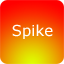
<style>
.page{position:relative;width:64px;height:64px}
.page>*{position:absolute;margin:0}
.t1{font:14.9px "Verdana";color:#ffffff}
</style>
<div class="page">
<p class="t1" style="left:12px;top:24px;width:41px;height:15px">Spike</p>
</div>
